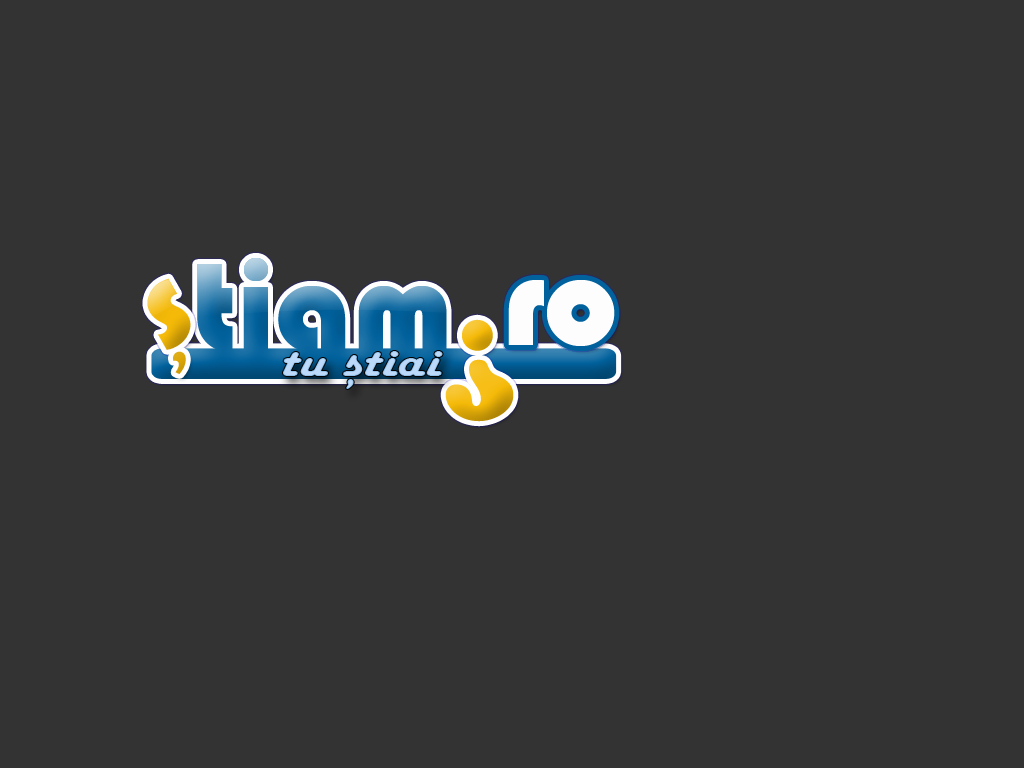
<style>
.page{position:relative;width:1024px;height:768px;background:#333333}
.page>*{position:absolute;margin:0}
.t1{font:91.7px "Bauhaus93";scale:1.16 1}
.t2{font:131px "Bauhaus93";color:#fdfdfd}
.t3{font:138px "CooperBlackStd"}
.t4{font:60.5px "ChaparralPro-Bold";color:#dca705;scale:1.14 1}
.t5{font:48px "HarlowSolid";color:#bcd9fa;scale:1.24 1}
.t6{font:46.4px "HarlowSolid";color:#b3d4f6}
</style>
<div class="page">
<p class="t1" style="left:147px;top:278px;width:44px;height:72px;rotate:-30deg">S</p>
<p class="t2" style="left:508px;top:280px;width:107px;height:66px">ro</p>
<p class="t3" style="left:445px;top:319px;width:69px;height:103px">?</p>
<p class="t4" style="left:173px;top:351px;width:13px;height:23px;rotate:-23deg">,</p>
<p class="t5" style="left:283px;top:351px;width:160px;height:25px">tu stiai</p>
<p class="t6" style="left:346px;top:379px;width:8px;height:10px">,</p>
</div>
